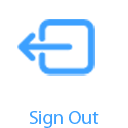
<style>
.page{position:relative;width:128px;height:128px;background:#ffffff}
.page>*{position:absolute;margin:0}
.t1{font:19.2px "MyriadPro-Regular";color:#3ca0ff}
</style>
<div class="page">
<p class="t1" style="left:29px;top:111px;width:70px;height:17px">Sign Out</p>
</div>
